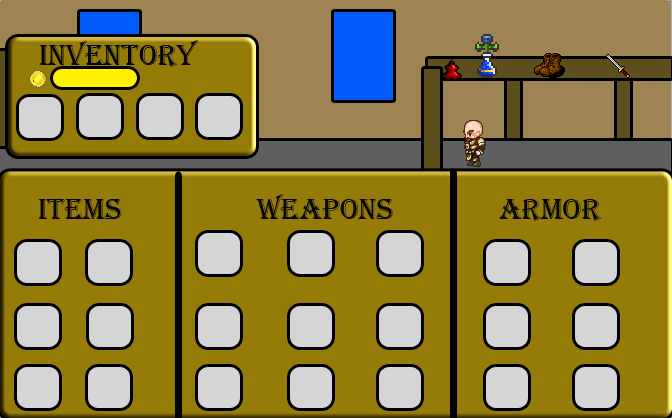
<style>
.page{position:relative;width:672px;height:418px;background:#957c09}
.page>*{position:absolute;margin:0}
.t1{font:30px "Algerian";color:#060606}
</style>
<div class="page">
<p class="t1" style="left:256px;top:194px;width:137px;height:25px">Weapons</p>
<p class="t1" style="left:38px;top:199px;width:84px;height:20px">Items</p>
<p class="t1" style="left:499px;top:199px;width:103px;height:23px">Armor</p>
</div>
